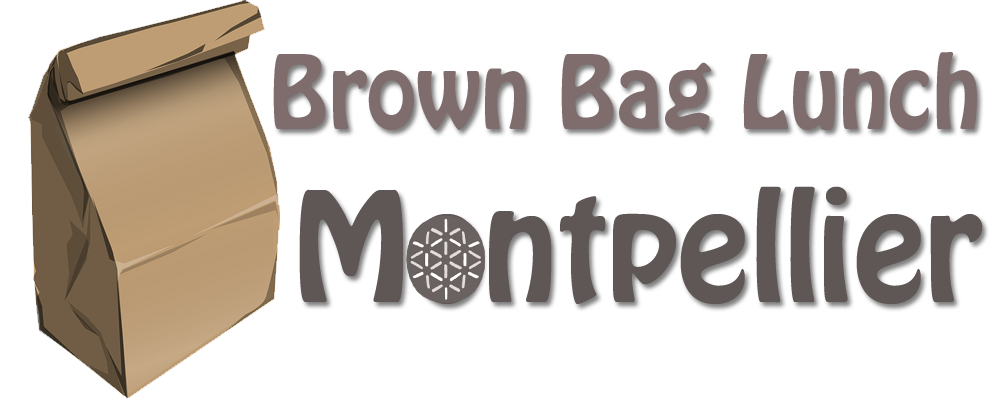
<style>
.page{position:relative;width:1000px;height:400px;background:#ffffff}
.page>*{position:absolute;margin:0}
.t1{font:90px "HoboStd";color:#7f6c6c}
.t2{font:135px "HoboStd";color:#5f5656}
</style>
<div class="page">
<p class="t1" style="left:273px;top:52px;width:704px;height:78px">Brown Bag Lunch</p>
<p class="t2" style="left:299px;top:186px;width:684px;height:118px">Montpellier</p>
</div>
